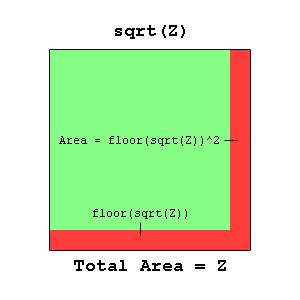
<style>
.page{position:relative;width:300px;height:300px;background:#ffffff}
.page>*{position:absolute;margin:0}
.t1{font:18px "CourierNewPS-BoldMT";color:#000000}
.t2{font:12px "CourierNewPSMT";color:#000000}
</style>
<div class="page">
<p class="t1" style="left:115px;top:25px;width:70px;height:14px">sqrt(Z)</p>
<p class="t2" style="left:59px;top:136px;width:160px;height:10px">Area = floor(sqrt(Z))^2</p>
<p class="t2" style="left:93px;top:209px;width:94px;height:10px">floor(sqrt(Z))</p>
<p class="t1" style="left:74px;top:260px;width:152px;height:11px">Total Area = Z</p>
</div>
